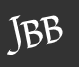
<style>
.page{position:relative;width:79px;height:67px;background:#333333}
.page>*{position:absolute;margin:0}
.t1{font:38px "Fondamento-Regular";color:#ffffff}
</style>
<div class="page">
<p class="t1" style="left:6px;top:15px;width:16px;height:41px;rotate:-13deg">J</p>
<p class="t1" style="left:39px;top:15px;width:24px;height:30px;rotate:-12deg">B</p>
<p class="t1" style="left:19px;top:19px;width:24px;height:30px;rotate:-12deg">B</p>
</div>
